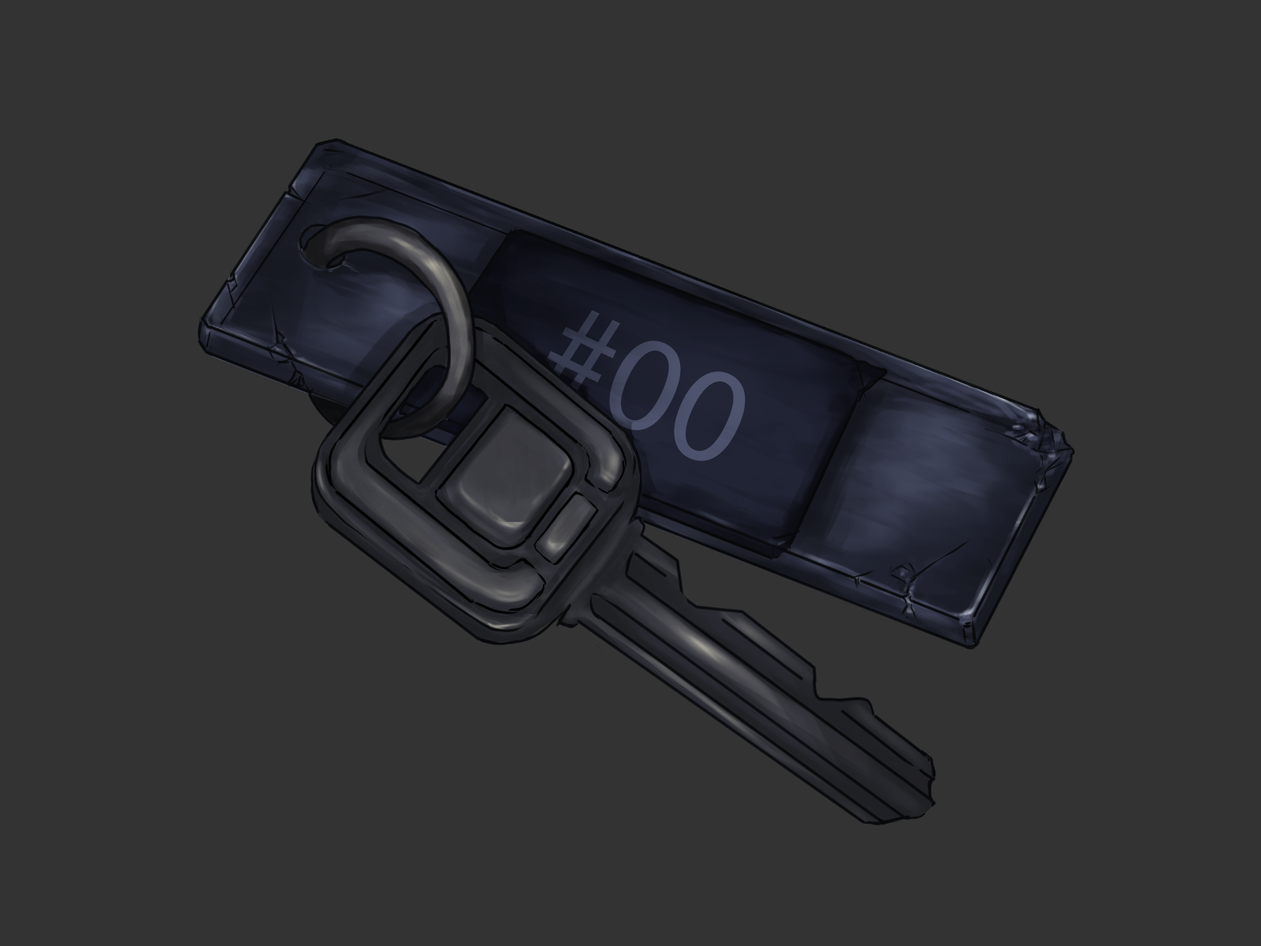
<style>
.page{position:relative;width:1261px;height:946px;background:#333333}
.page>*{position:absolute;margin:0}
.t1{font:138.2px "MyriadPro-Regular";color:#464d64;text-transform:uppercase}
</style>
<div class="page">
<p class="t1" style="left:542px;top:310px;width:204px;height:151px;rotate:25deg">#00</p>
</div>
